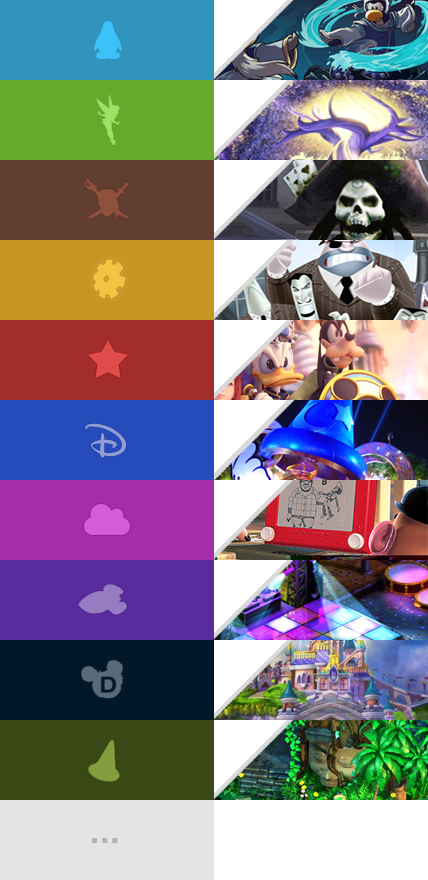
<style>
.page{position:relative;width:428px;height:880px}
.page>*{position:absolute;margin:0}
.t1{font:41.6px "Waltograph";color:#919ed5}
.t2{font:48px "BebasNeue";letter-spacing:0.025em;color:#b4b4b4}
</style>
<div class="page">
<p class="t1" style="left:85px;top:423px;width:41px;height:35px">D</p>
<p class="t2" style="left:92px;top:838px;width:26px;height:5px">...</p>
</div>
